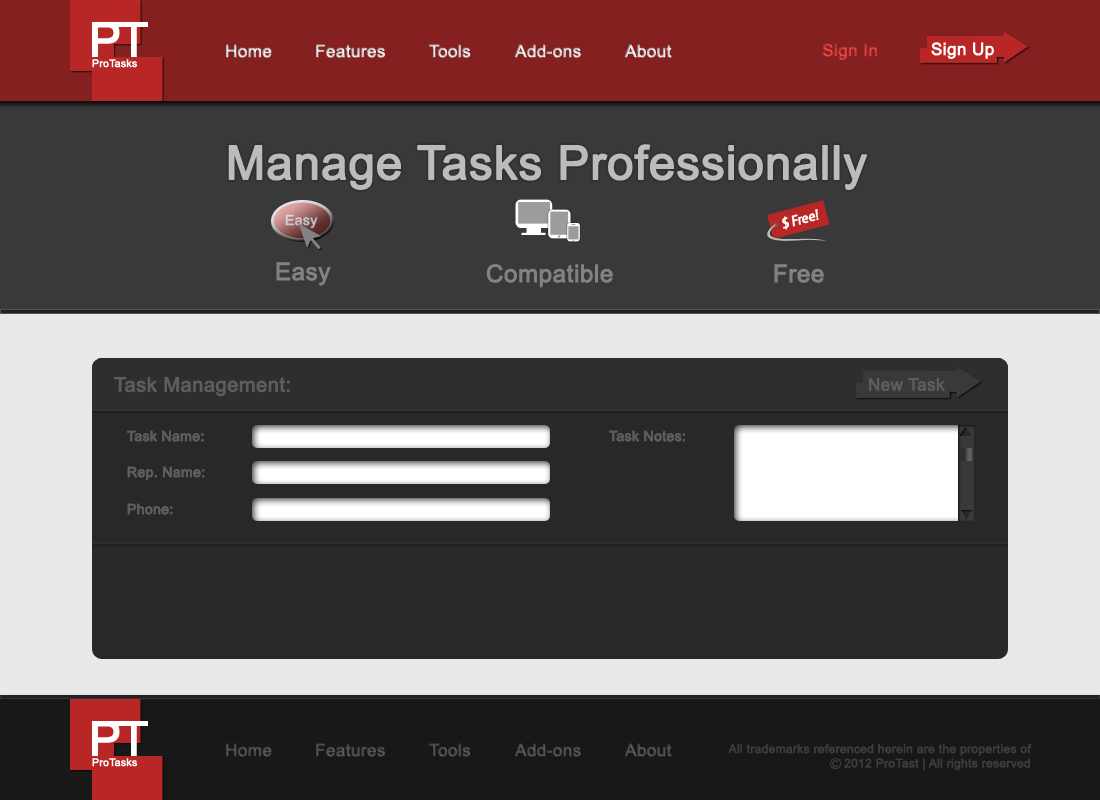
<style>
.page{position:relative;width:1100px;height:800px;background:#393939}
.page>*{position:absolute;margin:0}
.t1{font:17px "ArialMT";font-weight:bold}
.t2{font:17px "ArialMT";color:#ffffff;font-weight:bold}
.t3{font:10.5px "ArialMT";color:#ffffff;font-weight:bold}
.t4{font:47px "ArialMT";color:#bcbcbc;font-weight:bold}
.t5{font:14px "GouditaSansSFItalic";color:#ffffff;font-weight:bold}
.t6{font:14px "ArialMT";color:#c6c6c6;font-weight:bold}
.t7{font:24px "ArialMT";color:#828282;font-weight:bold}
.t8{font:20px "ArialMT";color:#5d5d5d;font-weight:bold}
.t9{font:17px "ArialMT";color:#5d5d5d;font-weight:bold}
.t10{font:14px "ArialMT";color:#5d5d5d;font-weight:bold}
.t11{font:17px "ArialMT";color:#4e4e4e;font-weight:bold}
.t12{font:17px "ArialMT";color:#4d4d4d;font-weight:bold}
.t13{font:17px "ArialMT";color:#4f4f4f;font-weight:bold}
.t14{font:12px "ArialMT";color:#3d3d3d;font-weight:bold}
</style>
<div class="page">
<p class="t1" style="left:226px;top:44px;width:46px;height:14px">Home</p>
<p class="t1" style="left:316px;top:44px;width:69px;height:14px">Features</p>
<p class="t1" style="left:429px;top:44px;width:42px;height:14px">Tools</p>
<p class="t1" style="left:514px;top:44px;width:67px;height:14px">Add-ons</p>
<p class="t1" style="left:624px;top:44px;width:48px;height:14px">About</p>
<p class="t1" style="left:822px;top:43px;width:55px;height:17px">Sign In</p>
<p class="t2" style="left:931px;top:42px;width:63px;height:17px">Sign Up</p>
<p class="t3" style="left:92px;top:59px;width:45px;height:9px">ProTasks</p>
<p class="t4" style="left:228px;top:144px;width:639px;height:46px">Manage Tasks Professionally</p>
<p class="t5" style="left:791px;top:209px;width:28px;height:18px;rotate:-15deg">Free!</p>
<p class="t6" style="left:285px;top:214px;width:33px;height:15px">Easy</p>
<p class="t5" style="left:782px;top:216px;width:7px;height:14px;rotate:-15deg">$</p>
<p class="t7" style="left:276px;top:262px;width:55px;height:24px">Easy</p>
<p class="t7" style="left:486px;top:264px;width:127px;height:24px">Compatible</p>
<p class="t7" style="left:774px;top:264px;width:50px;height:19px">Free</p>
<p class="t8" style="left:114px;top:377px;width:176px;height:20px">Task Management:</p>
<p class="t9" style="left:869px;top:378px;width:76px;height:13px">New Task</p>
<p class="t10" style="left:127px;top:430px;width:77px;height:12px">Task Name:</p>
<p class="t10" style="left:127px;top:430px;width:77px;height:12px">Task Name:</p>
<p class="t10" style="left:609px;top:430px;width:76px;height:12px">Task Notes:</p>
<p class="t10" style="left:609px;top:430px;width:76px;height:12px">Task Notes:</p>
<p class="t10" style="left:127px;top:466px;width:78px;height:14px">Rep. Name:</p>
<p class="t10" style="left:127px;top:466px;width:78px;height:14px">Rep. Name:</p>
<p class="t10" style="left:127px;top:503px;width:46px;height:12px">Phone:</p>
<p class="t10" style="left:127px;top:503px;width:46px;height:12px">Phone:</p>
<p class="t11" style="left:226px;top:743px;width:46px;height:14px">Home</p>
<p class="t11" style="left:316px;top:743px;width:69px;height:14px">Features</p>
<p class="t12" style="left:429px;top:743px;width:42px;height:14px">Tools</p>
<p class="t13" style="left:514px;top:743px;width:67px;height:14px">Add-ons</p>
<p class="t13" style="left:624px;top:743px;width:48px;height:14px">About</p>
<p class="t14" style="left:728px;top:744px;width:304px;height:27px;text-align:right">All trademarks referenced herein are the properties of<br>2012 ProTast | All rights reserved</p>
<p class="t3" style="left:92px;top:758px;width:45px;height:9px">ProTasks</p>
</div>
